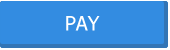
<style>
.page{position:relative;width:170px;height:50px;background:#338ce1}
.page>*{position:absolute;margin:0}
.t1{font:20px "Tahoma";color:#ffffff}
</style>
<div class="page">
<p class="t1" style="left:66px;top:16px;width:34px;height:15px">PAY</p>
</div>
